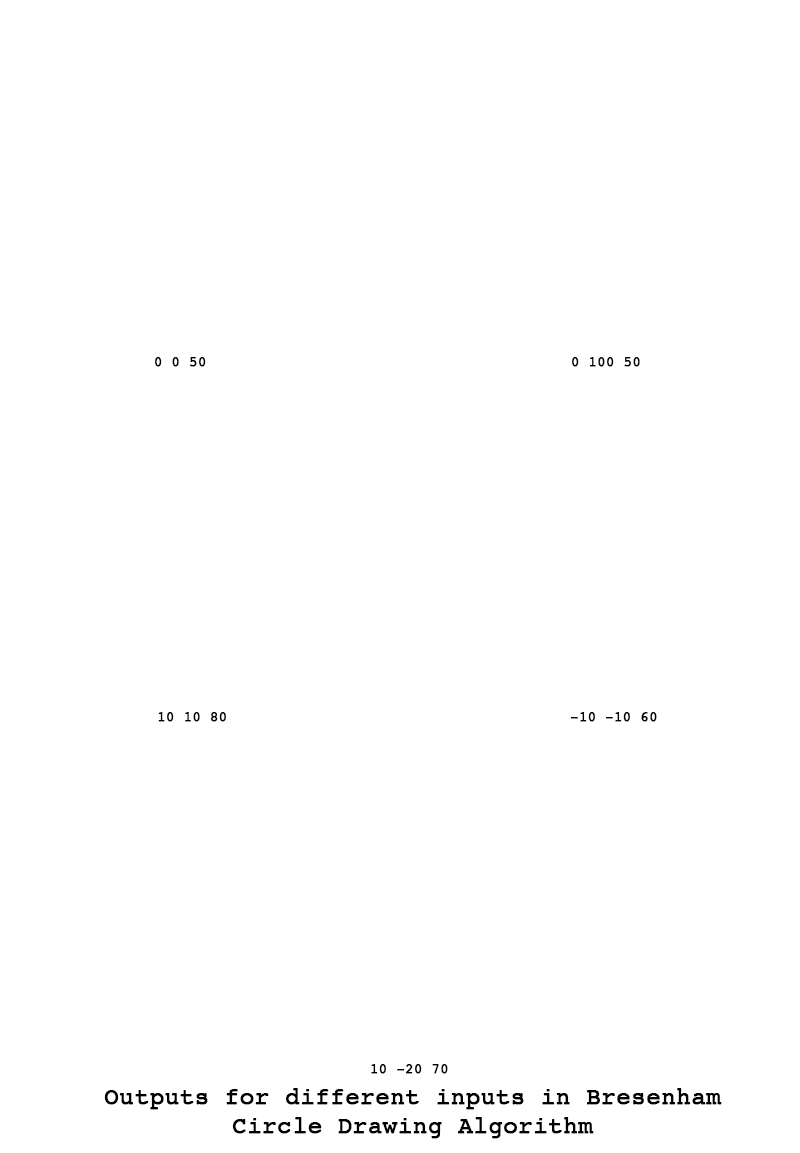
<style>
.page{position:relative;width:800px;height:1153px;background:#ffffff}
.page>*{position:absolute;margin:0}
.t1{font:14px "Courier";color:#000000;font-weight:bold}
.t2{font:24px "Courier";color:#000000;font-weight:bold}
</style>
<div class="page">
<p class="t1" style="left:155px;top:357px;width:51px;height:10px">0 0 50</p>
<p class="t1" style="left:572px;top:357px;width:68px;height:10px">0 100 50</p>
<p class="t1" style="left:158px;top:712px;width:68px;height:10px">10 10 80</p>
<p class="t1" style="left:570px;top:712px;width:87px;height:10px">-10 -10 60</p>
<p class="t1" style="left:371px;top:1064px;width:77px;height:10px">10 -20 70</p>
<p class="t2" style="left:104px;top:1088px;width:618px;height:51px;text-align:center">Outputs for different inputs in Bresenham<br>Circle Drawing Algorithm</p>
</div>
